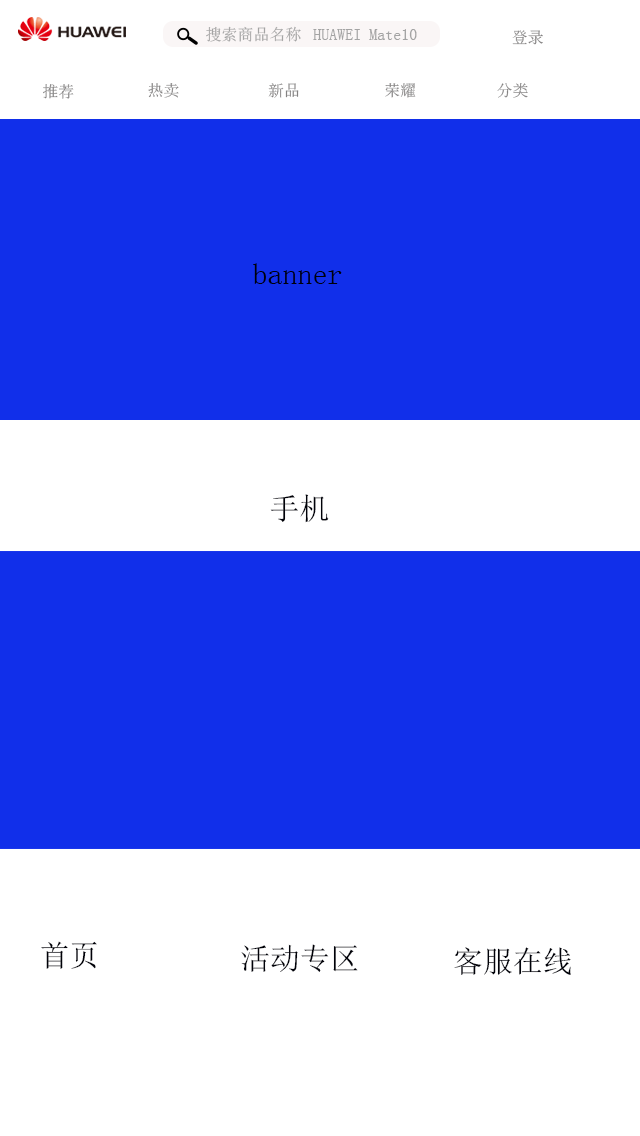
<style>
.page{position:relative;width:640px;height:1136px;background:#112fea}
.page>*{position:absolute;margin:0}
.t1{font:16px "SimSun";color:#a4a4a4}
.t2{font:16px "SimSun";color:#848282}
.t3{font:30px "SimSun";color:#000108}
</style>
<div class="page">
<p class="t1" style="left:206px;top:26px;width:95px;height:16px">搜索商品名称</p>
<p class="t1" style="left:313px;top:29px;width:104px;height:11px">HUAWEI Mate10</p>
<p class="t2" style="left:512px;top:30px;width:31px;height:15px">登录</p>
<p class="t2" style="left:43px;top:84px;width:31px;height:15px">推荐</p>
<p class="t2" style="left:148px;top:83px;width:31px;height:15px">热卖</p>
<p class="t2" style="left:268px;top:83px;width:31px;height:15px">新品</p>
<p class="t2" style="left:385px;top:83px;width:31px;height:15px">荣耀</p>
<p class="t2" style="left:497px;top:83px;width:31px;height:15px">分类</p>
<p class="t3" style="left:253px;top:263px;width:89px;height:21px">banner</p>
<p class="t3" style="left:270px;top:494px;width:59px;height:29px">手机</p>
<p class="t3" style="left:41px;top:941px;width:56px;height:28px">首页</p>
<p class="t3" style="left:241px;top:944px;width:117px;height:28px">活动专区</p>
<p class="t3" style="left:454px;top:947px;width:117px;height:28px">客服在线</p>
</div>
